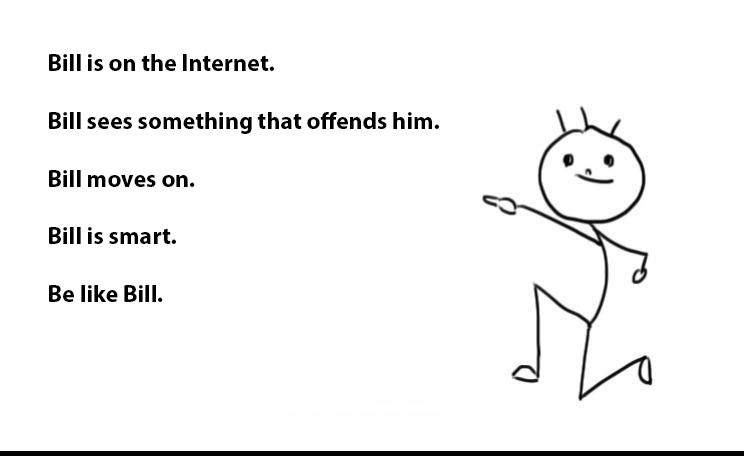
<style>
.page{position:relative;width:744px;height:456px;background:#ffffff}
.page>*{position:absolute;margin:0}
.t1{font:24px "MyriadPro-Bold";color:#000000}
</style>
<div class="page">
<p class="t1" style="left:49px;top:54px;width:390px;height:248px">Bill is on the Internet.<br><br>Bill sees something that offends him.<br><br>Bill moves on.<br><br>Bill is smart.<br><br>Be like Bill.</p>
</div>
